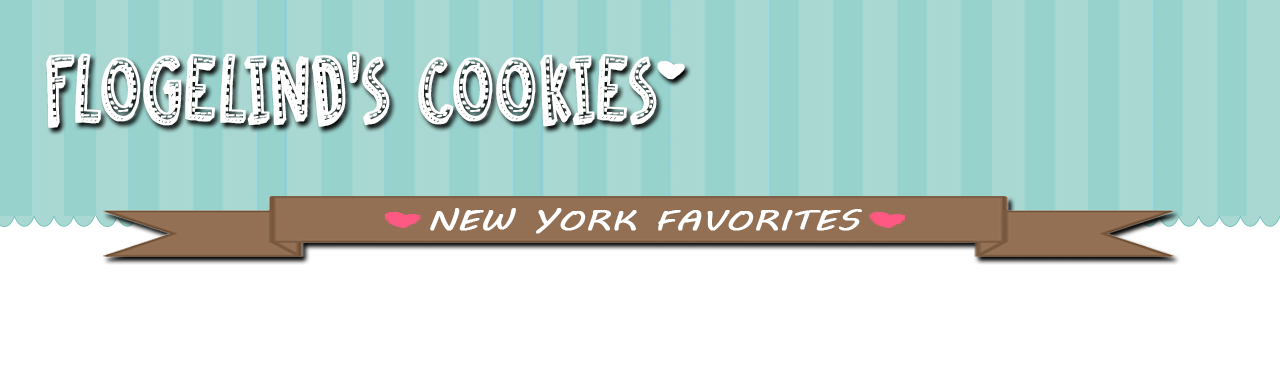
<style>
.page{position:relative;width:1280px;height:383px;background:#ffffff}
.page>*{position:absolute;margin:0}
.t1{font:84.5px "DKCosmoStitch";color:#ffffff;font-weight:bold;scale:0.87 1}
.t2{font:28.4px "MVBoli";color:#ffffff;font-weight:bold;scale:1.27 1}
</style>
<div class="page">
<p class="t1" style="left:46px;top:51px;width:611px;height:77px">FLOGELIND’S COOKIES</p>
<p class="t2" style="left:430px;top:208px;width:432px;height:26px">NEW YORK FAVORITES</p>
</div>
